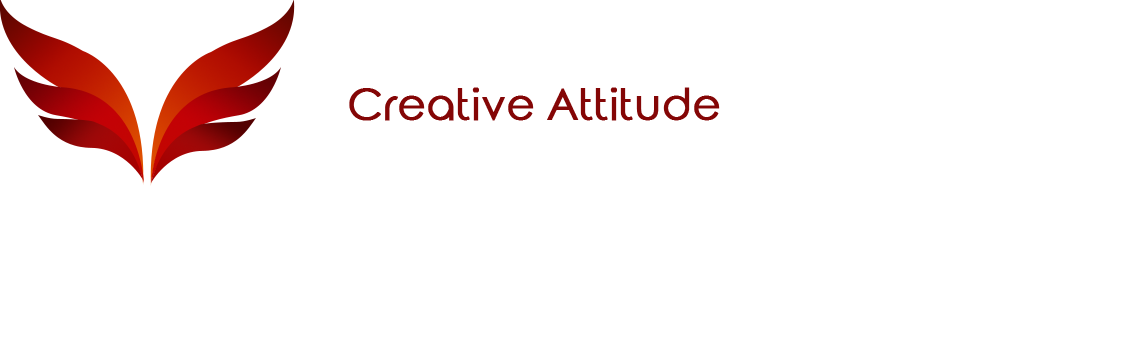
<style>
.page{position:relative;width:1134px;height:360px;background:#ffffff}
.page>*{position:absolute;margin:0}
.t1{font:43px "RoundedElegance-Regular";color:#840606;font-weight:bold}
</style>
<div class="page">
<p class="t1" style="left:349px;top:87px;width:371px;height:34px">Creative Attitude</p>
</div>
